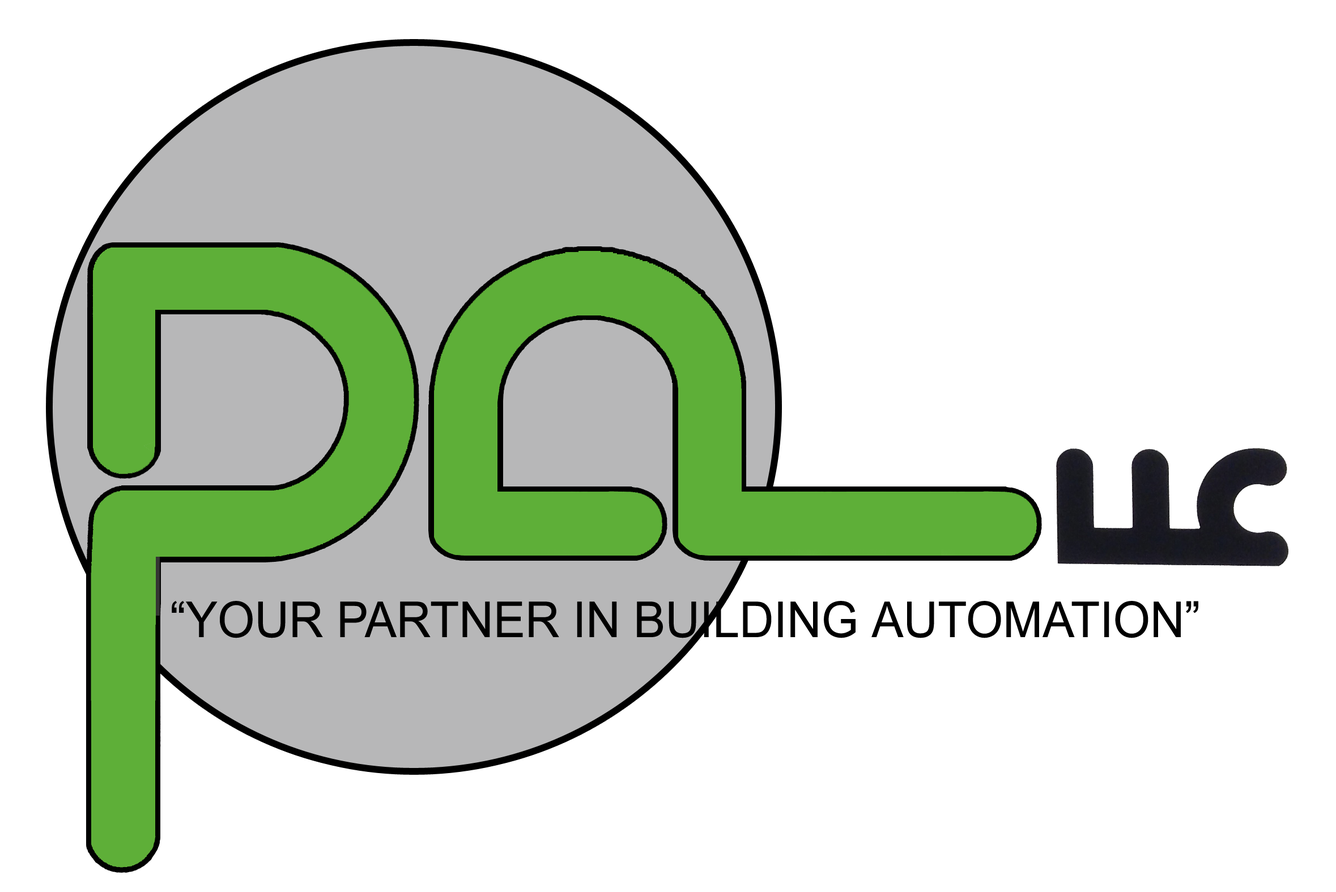
<style>
.page{position:relative;width:1336px;height:892px;background:#ffffff}
.page>*{position:absolute;margin:0}
.t1{font:49.6px "ArialMT";color:#000000;scale:0.96 1}
</style>
<div class="page">
<p class="t1" style="left:172px;top:601px;width:1026px;height:38px">“YOUR PARTNER IN BUILDING AUTOMATION”</p>
</div>
